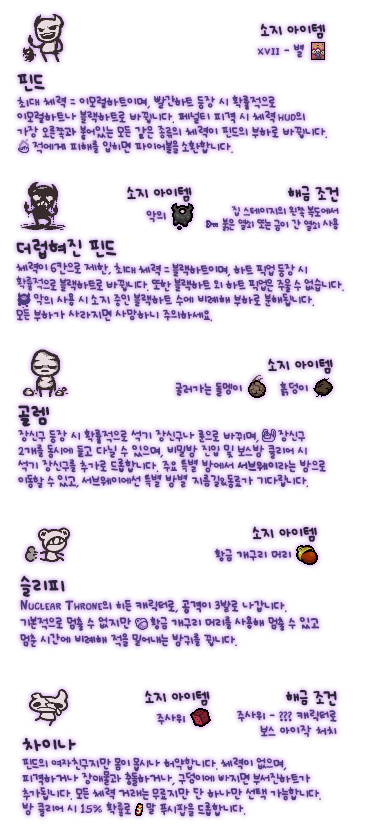
<style>
.page{position:relative;width:373px;height:835px;background:#ffffff}
.page>*{position:absolute;margin:0}
.t1{font:12px "UhBeeSe_hyunBold";color:#2b2636}
.t2{font:12px "UhBeeSe_hyunBold";letter-spacing:-0.1em;color:#2b2636}
.t3{font:10px "Font_soulsV2_Title-Regular";color:#4e3d7c}
.t4{font:10px "UhBeeSe_hyunBold";color:#4e3d7c}
.t5{font:10px/15px "UhBeeSe_hyunBold";letter-spacing:-0.025em;color:#4e3d7c}
.t6{font:16px/23px "UhBeeSe_hyunBold";color:#2b2636}
.t7{font:10px/15px "UhBeeSe_hyunBold";letter-spacing:-0.2em;color:#4e3d7c}
.t8{font:10px/15px "UhBeeSe_hyunBold";letter-spacing:-0.15em;color:#4e3d7c}
.t9{font:10px/15px "Font_soulsV2_Title-Regular";letter-spacing:-0.025em;color:#4e3d7c}
.t10{font:10px/15px "UhBeeSe_hyunBold";color:#4e3d7c}
.t11{font:10px/15px "UhBeeSe_hyunBold";letter-spacing:-0.125em;color:#4e3d7c}
.t12{font:12px "UhBeeSe_hyunBold";letter-spacing:-0.15em;color:#2b2636}
.t13{font:9px/13px "UhBeeSe_hyunBold";letter-spacing:-0.05em;color:#4e3d7c}
.t14{font:10px/15px "UhBeeSe_hyunBold";letter-spacing:-0.075em;color:#4e3d7c}
.t15{font:10px/15px "UhBeeSe_hyun";letter-spacing:-0.075em;color:#4e3d7c}
.t16{font:10px/15px "UhBeeSe_hyunBold";letter-spacing:-0.025em;color:#4e3d7c;font-weight:bold}
.t17{font:10px/17px "UhBeeSe_hyunBold";letter-spacing:-0.025em;color:#4e3d7c}
.t18{font:14px/17px "Font_soulsV2_Title-Regular";letter-spacing:-0.025em;color:#4e3d7c;font-variant:small-caps}
.t19{font:10px/14.5px "UhBeeSe_hyunBold";color:#4e3d7c}
.t20{font:10px/15px "UhBeeSe_hyunBold";letter-spacing:-0.05em;color:#4e3d7c}
.t21{font:16px/21px "UhBeeSe_hyunBold";color:#2b2636}
.t22{font:10px/15px "UhBeeSe_hyun";letter-spacing:-0.05em;color:#4e3d7c}
.t23{font:10px/15px "UhBeeSe_hyun";letter-spacing:-0.1em;color:#4e3d7c}
.t24{font:10px/15px "UhBeeSe_hyun";letter-spacing:-0.025em;color:#4e3d7c}
</style>
<div class="page">
<p class="t1" style="left:260px;top:23px;width:66px;height:16px"><span class="t2">소</span>지 아이템</p>
<p class="t3" style="left:257px;top:44px;width:47px;height:14px">XVII<span class="t4"> - 별</span></p>
<p class="t5" style="left:17px;top:73px;width:310px;height:81px"><span class="t6">핀드<br></span>최대 체력 = 이모럴하트이며, <span class="t7">빨</span><span class="t8">간하</span>트 등장 시 확률적으로<br>이모럴하트나 블랙하트로 바뀝니다. 페널티 피격 시 체력<span class="t9"> HUD</span>의 <span class="t8">가</span>장 오른쪽과 붙어있는 모든 같은 종류의 체력이 핀드의 부하로 바뀝니다.<br>    적에게 피해를 입히면 파<span class="t10">이어볼을</span><span class="t11"> 소환</span>합니다.</p>
<p class="t1" style="left:287px;top:185px;width:52px;height:18px">해금 <span class="t12">조</span>건</p>
<p class="t1" style="left:127px;top:186px;width:65px;height:16px"><span class="t2">소</span>지 아이템</p>
<p class="t13" style="left:222px;top:205px;width:117px;height:27px;text-align:right">집 스테이지의 왼쪽 복도에서<br>붉은 열쇠 또는 금이 간 열쇠 사용</p>
<p class="t4" style="left:146px;top:210px;width:20px;height:13px">악의</p>
<p class="t5" style="left:16px;top:239px;width:328px;height:83px"><span class="t6">더럽혀진 핀드<br></span><span class="t14">체력이 6칸으로 제한, 최대 체력 = 블랙하트이며, 하트 픽업 등장 시<br></span><span class="t15">확률적</span><span class="t14">으로 블랙하트로 바뀝니다. 또한 블랙하트 외 하트 픽업은 주울 수 </span>없습니다.<br>     악의 사용 시 소지 중인 블랙하트 수에 비례해 부하로 분해됩니다. <br>모든 부하가 사라지면 사망하니 주의하세요.</p>
<p class="t1" style="left:268px;top:358px;width:65px;height:16px"><span class="t2">소</span>지 아이템</p>
<p class="t4" style="left:175px;top:382px;width:67px;height:15px">굴러가는 돌멩이</p>
<p class="t4" style="left:280px;top:381px;width:28px;height:15px">흙덩이</p>
<p class="t5" style="left:18px;top:405px;width:308px;height:84px"><span class="t6">골렘<br></span>장신구 등장 시 확률적으로 석기 장신구나 룬으로 바뀌며,     장신구<br>2개를 동시에 들고 다닐 수 있으며, 비밀방 진입 및 보스방 클리어 시 <br>석기 장신구를 추가로 드롭합니다. 주요 특별 방에서 <span class="t16">서브웨이</span>라는 방으로<br><span class="t14">이동할 수 있고, </span>서브웨이에선 특별 방별 지름길&amp;동료가 기<span class="t14">다립</span><span class="t10">니</span><span class="t14">다.</span></p>
<p class="t1" style="left:252px;top:526px;width:65px;height:16px"><span class="t2">소</span>지 아이템</p>
<p class="t4" style="left:214px;top:548px;width:78px;height:14px">황금 개구리 머리</p>
<p class="t17" style="left:20px;top:575px;width:300px;height:73px"><span class="t6">슬리피<br></span><span class="t18">Nuclear Throne</span>의 히든 캐릭터로, 공격이 3발로 나갑니다.<br>기본적으로 멈출 수 없지만     황금 개구리 머리를 사용해 멈출 수 있고<br>멈춘 시간에 비례해 적을 밀어내는 방귀를 뀝니다.</p>
<p class="t1" style="left:285px;top:689px;width:52px;height:18px">해금 <span class="t12">조</span>건</p>
<p class="t1" style="left:145px;top:690px;width:65px;height:16px"><span class="t2">소</span>지 아이템</p>
<p class="t4" style="left:156px;top:713px;width:30px;height:12px">주사위</p>
<p class="t19" style="left:236px;top:709px;width:101px;height:28px;text-align:right">주사위 - ??? 캐릭터로<br>보스 아이작 처치</p>
<p class="t20" style="left:22px;top:738px;width:299px;height:79px"><span class="t21">차이나<br></span>핀드의 여자친구지만 몸이 몹시나 허약<span class="t22">합</span><span class="t10">니</span>다. 체력이 없으며, 피격하거나 장애물<span class="t22">과</span> 충돌하거나, 구덩이에 <span class="t23">빠</span>지면 부서진하트가<br><span class="t8">추</span>가<span class="t10">됩니</span>다. 모든 체력 거래는 무료지만 단 하나만 선택 가능합니다.<br><span class="t5">방 클리어 시 </span><span class="t9">15%</span><span class="t5"> 확</span><span class="t24">률</span><span class="t5">로    말 푸시</span><span class="t24">팝</span><span class="t5">을 드롭합니다.</span></p>
</div>
